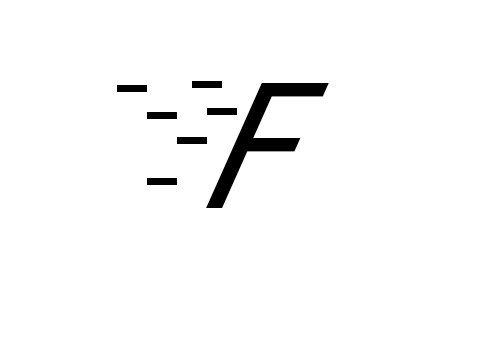
<style>
.page{position:relative;width:504px;height:360px;background:#ffffff}
.page>*{position:absolute;margin:0}
.t1{font:203.4px "MyriadPro-Regular";color:#000000;scale:0.91 1}
</style>
<div class="page">
<p class="t1" style="left:206px;top:83px;width:123px;height:125px">F</p>
</div>
